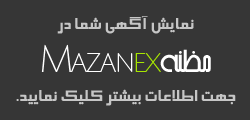
<style>
.page{position:relative;width:250px;height:120px;background:#363636}
.page>*{position:absolute;margin:0}
.t1{font:20px/24px "BElham";color:#c6c6c6}
</style>
<div class="page">
<p class="t1" style="left:16px;top:16px;width:220px;height:90px;text-align:center">نمایش آگهی شما در<br><br><br>جهت اطلاعات بیشتر کلیک نمایید.</p>
</div>
